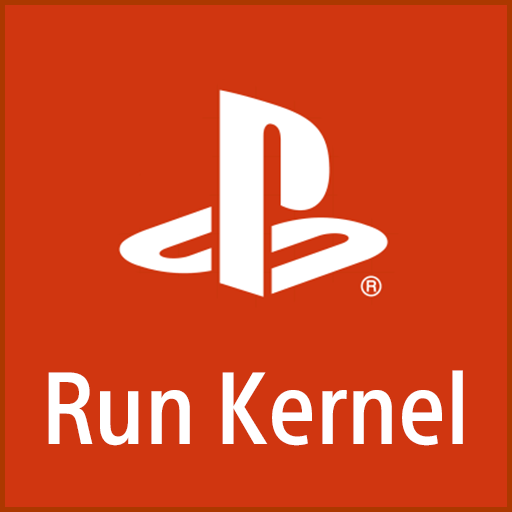
<style>
.page{position:relative;width:512px;height:512px;background:#d03610}
.page>*{position:absolute;margin:0}
.t1{font:100px "SST-CondensedMd";color:#ffffff}
</style>
<div class="page">
<p class="t1" style="left:48px;top:370px;width:415px;height:76px">Run Kernel</p>
</div>
